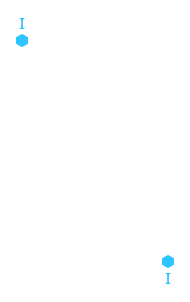
<style>
.page{position:relative;width:190px;height:302px;background:#ffffff}
.page>*{position:absolute;margin:0}
.t1{font:16.7px "BellMT";color:#2ec4ff;scale:1.1 1}
</style>
<div class="page">
<p class="t1" style="left:19px;top:18px;width:6px;height:11px">I</p>
<p class="t1" style="left:165px;top:273px;width:6px;height:11px">I</p>
</div>
